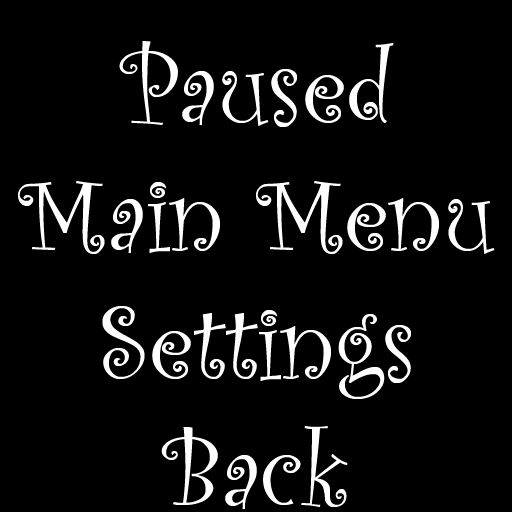
<style>
.page{position:relative;width:512px;height:512px;background:#000000}
.page>*{position:absolute;margin:0}
.t1{font:106.7px "CurlzMT";color:#ffffff}
</style>
<div class="page">
<p class="t1" style="left:18px;top:41px;width:477px;height:468px;text-align:center">Paused<br>Main Menu<br>Settings<br>Back</p>
</div>
